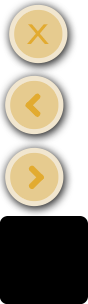
<style>
.page{position:relative;width:88px;height:304px;background:#000000}
.page>*{position:absolute;margin:0}
.t1{font:37.1px "CenturyGothic";color:#e2ab30;scale:1.21 1}
</style>
<div class="page">
<p class="t1" style="left:27px;top:24px;width:22px;height:20px">x</p>
</div>
